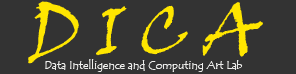
<style>
.page{position:relative;width:296px;height:74px;background:#333333}
.page>*{position:absolute;margin:0}
.t1{font:69px "VinerHandITC";color:#ffe600}
.t2{font:11.5px "TempusSansITC";color:#eeeeec}
</style>
<div class="page">
<p class="t1" style="left:28px;top:1px;width:235px;height:63px">D I C A</p>
<p class="t2" style="left:45px;top:59px;width:198px;height:13px">Data Intelligence and Computing Art Lab</p>
</div>
